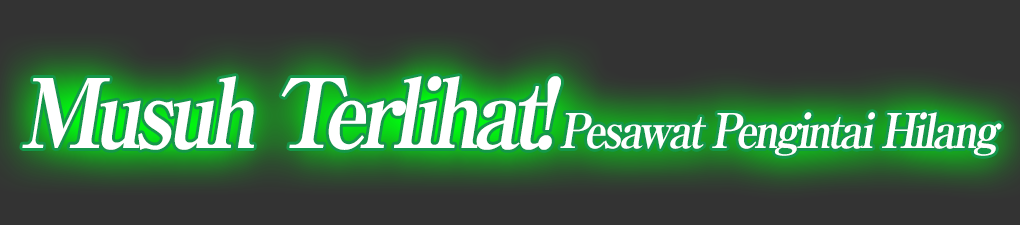
<style>
.page{position:relative;width:1020px;height:225px;background:#333333}
.page>*{position:absolute;margin:0}
.t1{font:48px "RyuminPro-ExBold";letter-spacing:-0.08em;color:#ffffff;font-style:italic;scale:0.9 1}
.t2{font:96px "RyuminPro-ExBold";letter-spacing:-0.08em;color:#ffffff;font-style:italic;scale:0.9 1}
</style>
<div class="page">
<p class="t1" style="left:22px;top:76px;width:980px;height:80px"><span class="t2">Musuh Terlihat!</span> Pesawat Pengintai Hilang</p>
<p class="t1" style="left:22px;top:76px;width:980px;height:80px"><span class="t2">Musuh Terlihat!</span> Pesawat Pengintai Hilang</p>
</div>
